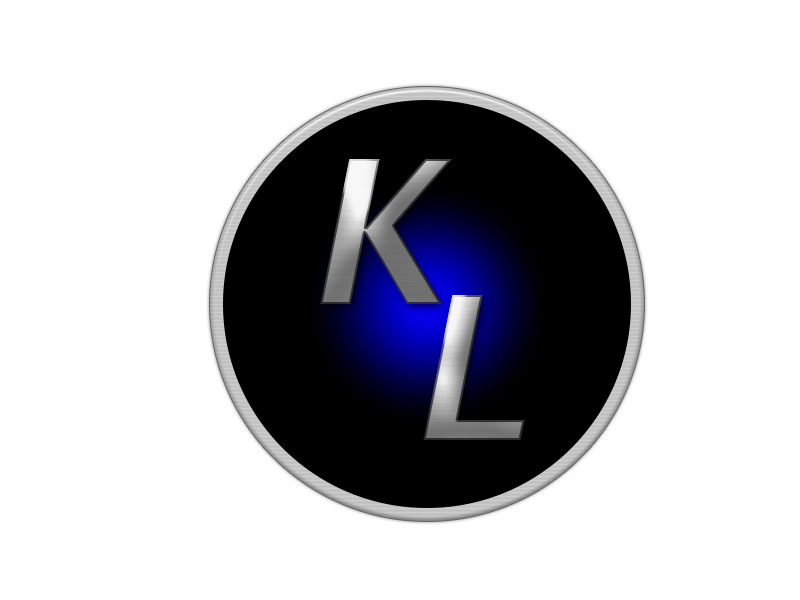
<style>
.page{position:relative;width:800px;height:600px;background:#ffffff}
.page>*{position:absolute;margin:0}
.t1{font:200px "LucidaSans-DemiItalic"}
</style>
<div class="page">
<p class="t1" style="left:320px;top:159px;width:132px;height:145px">K</p>
<p class="t1" style="left:423px;top:295px;width:102px;height:145px">L</p>
</div>
